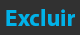
<style>
.page{position:relative;width:80px;height:35px;background:#313131}
.page>*{position:absolute;margin:0}
.t1{font:23.5px "MyriadPro-Bold";color:#00b2e8}
</style>
<div class="page">
<p class="t1" style="left:6px;top:9px;width:69px;height:17px">Excluir</p>
</div>
